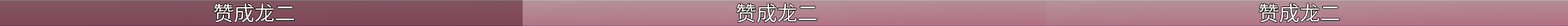
<style>
.page{position:relative;width:1568px;height:26px}
.page>*{position:absolute;margin:0}
.t1{font:20.6px "SourceHanSansSC-Normal";color:#ffffff}
</style>
<div class="page">
<p class="t1" style="left:214px;top:3px;width:80px;height:20px">赞成龙二</p>
<p class="t1" style="left:736px;top:3px;width:81px;height:20px">赞成龙二</p>
<p class="t1" style="left:1259px;top:3px;width:80px;height:20px">赞成龙二</p>
</div>
